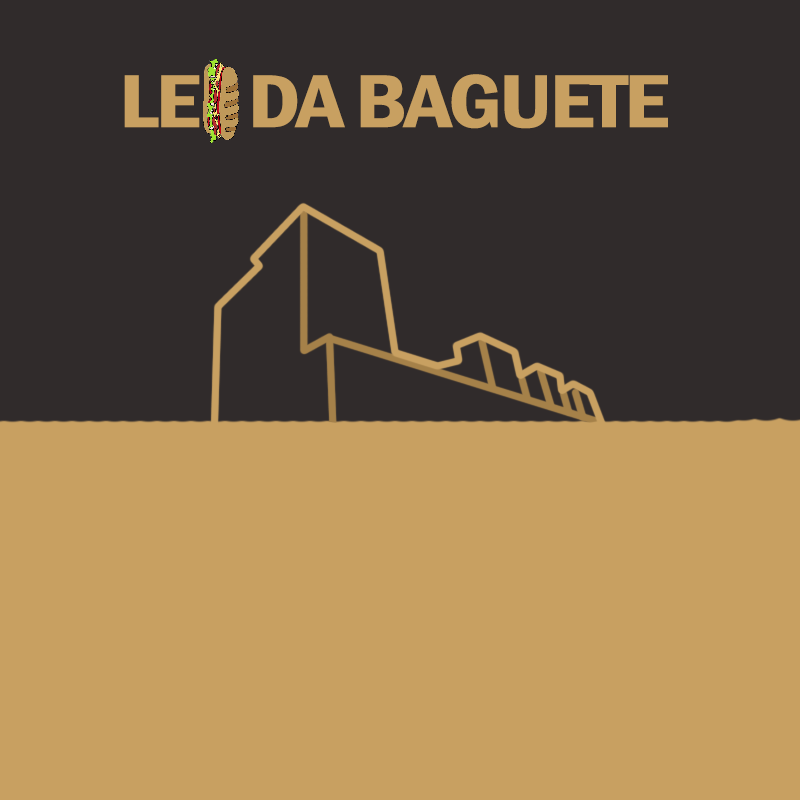
<style>
.page{position:relative;width:800px;height:800px;background:#c8a061}
.page>*{position:absolute;margin:0}
.t1{font:132.9px "FranklinGothic-DemiCond";letter-spacing:-0.06em;color:#c8a061;font-weight:bold;scale:1.2 1}
</style>
<div class="page">
<p class="t1" style="left:124px;top:74px;width:544px;height:55px">LE I DA BAGUETE</p>
</div>
